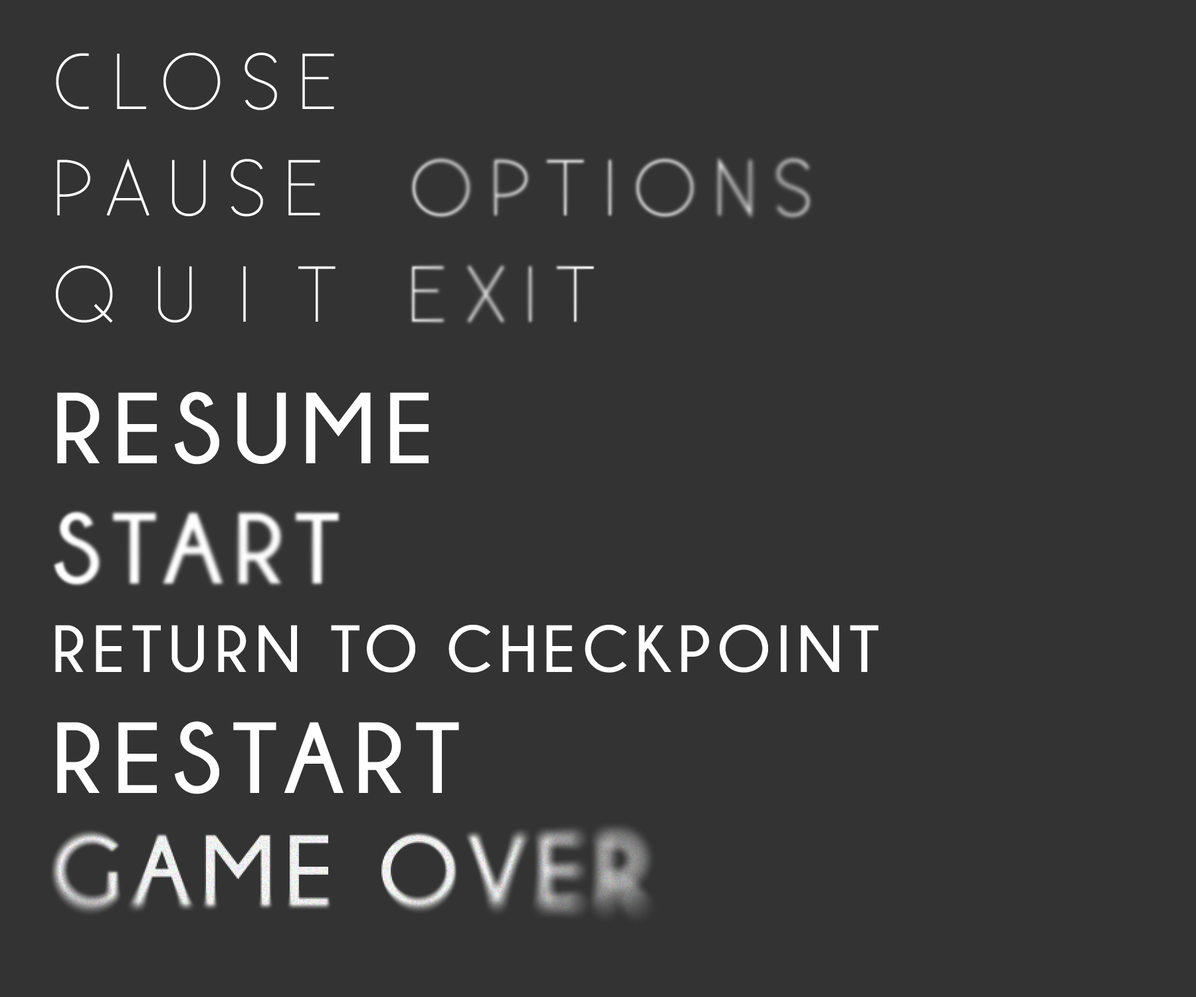
<style>
.page{position:relative;width:1196px;height:997px;background:#333333}
.page>*{position:absolute;margin:0}
.t1{font:79.1px "Existence-Light";letter-spacing:0.2em;color:#ffffff}
.t2{font:100.4px "Champagne&Limousines-Bold";letter-spacing:0.1em;color:#ffffff}
.t3{font:66.5px "Champagne&Limousines-Bold";letter-spacing:0.1em;color:#ffffff}
</style>
<div class="page">
<p class="t1" style="left:56px;top:53px;width:278px;height:57px">CLOSE</p>
<p class="t1" style="left:57px;top:158px;width:263px;height:59px">PAUSE</p>
<p class="t1" style="left:56px;top:265px;width:280px;height:58px">QUIT</p>
<p class="t2" style="left:57px;top:391px;width:372px;height:74px">RESUME</p>
<p class="t3" style="left:55px;top:624px;width:824px;height:49px">RETURN TO CHECKPOINT</p>
<p class="t2" style="left:57px;top:721px;width:402px;height:73px">RESTART</p>
</div>
